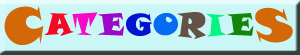
<style>
.page{position:relative;width:300px;height:55px;background:#caf6f6}
.page>*{position:absolute;margin:0}
.t1{font:50.9px "SnapITC-Regular";color:#d36809}
.t2{font:30px "SnapITC-Regular";color:#f60925}
.t3{font:30px "SnapITC-Regular";color:#f609c7}
.t4{font:30px "SnapITC-Regular";color:#a006c7}
.t5{font:30px "SnapITC-Regular";color:#0513cf}
.t6{font:30px "SnapITC-Regular";color:#066af3}
.t7{font:34.2px "SnapITC-Regular";color:#645246}
.t8{font:30px "SnapITC-Regular";color:#06f386}
.t9{font:30px "SnapITC-Regular";color:#158509}
.t10{font:45.7px "SnapITC-Regular";color:#d36809}
</style>
<div class="page">
<p class="t1" style="left:4px;top:6px;width:40px;height:39px">C</p>
<p class="t2" style="left:44px;top:13px;width:30px;height:23px">A</p>
<p class="t3" style="left:72px;top:12px;width:26px;height:24px">T</p>
<p class="t4" style="left:98px;top:13px;width:26px;height:23px">E</p>
<p class="t5" style="left:126px;top:13px;width:26px;height:23px">G</p>
<p class="t6" style="left:153px;top:13px;width:25px;height:23px">O</p>
<p class="t7" style="left:177px;top:12px;width:29px;height:27px">R</p>
<p class="t8" style="left:206px;top:13px;width:20px;height:24px">I</p>
<p class="t9" style="left:227px;top:13px;width:27px;height:23px">E</p>
<p class="t10" style="left:255px;top:7px;width:38px;height:36px">S</p>
</div>
